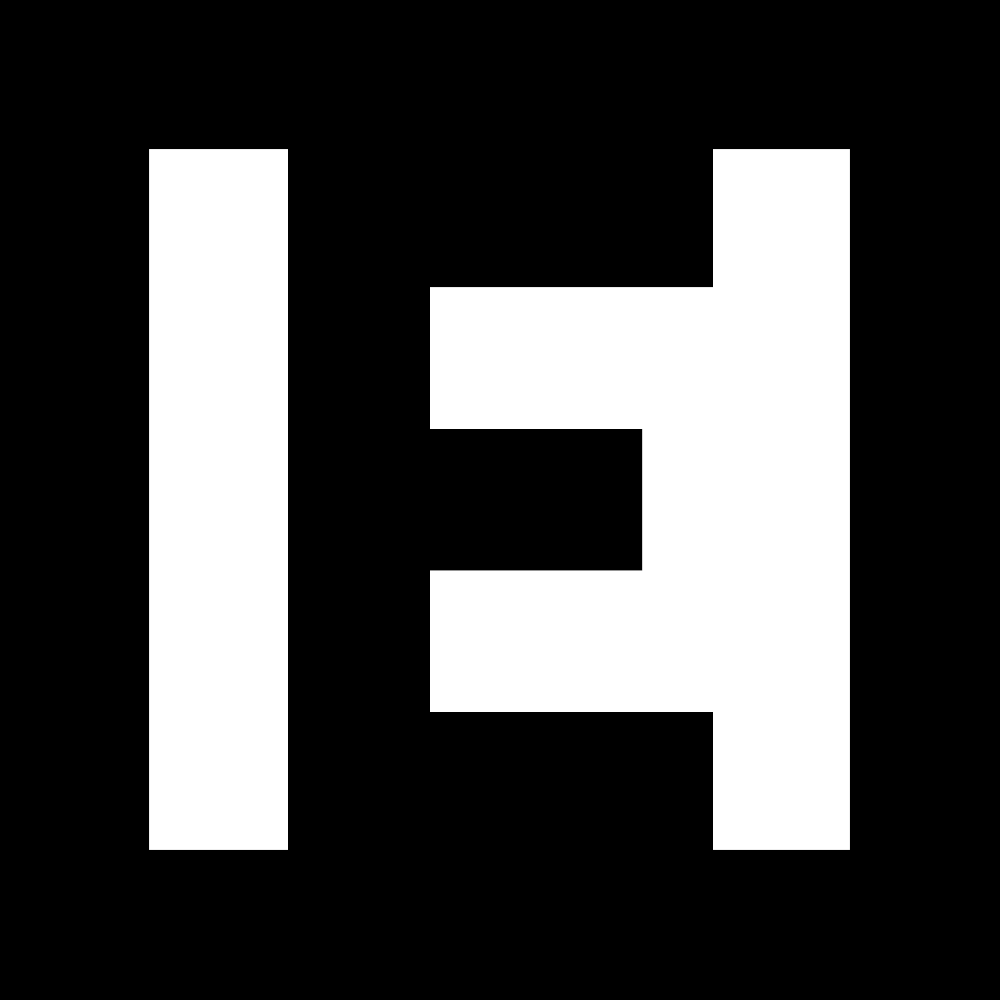
<style>
.page{position:relative;width:1000px;height:1000px;background:#000000}
.page>*{position:absolute;margin:0}
.t1{font:900px "LemonMilk";color:#000000}
</style>
<div class="page">
<p class="t1" style="left:288px;top:145px;width:425px;height:709px">E</p>
</div>
